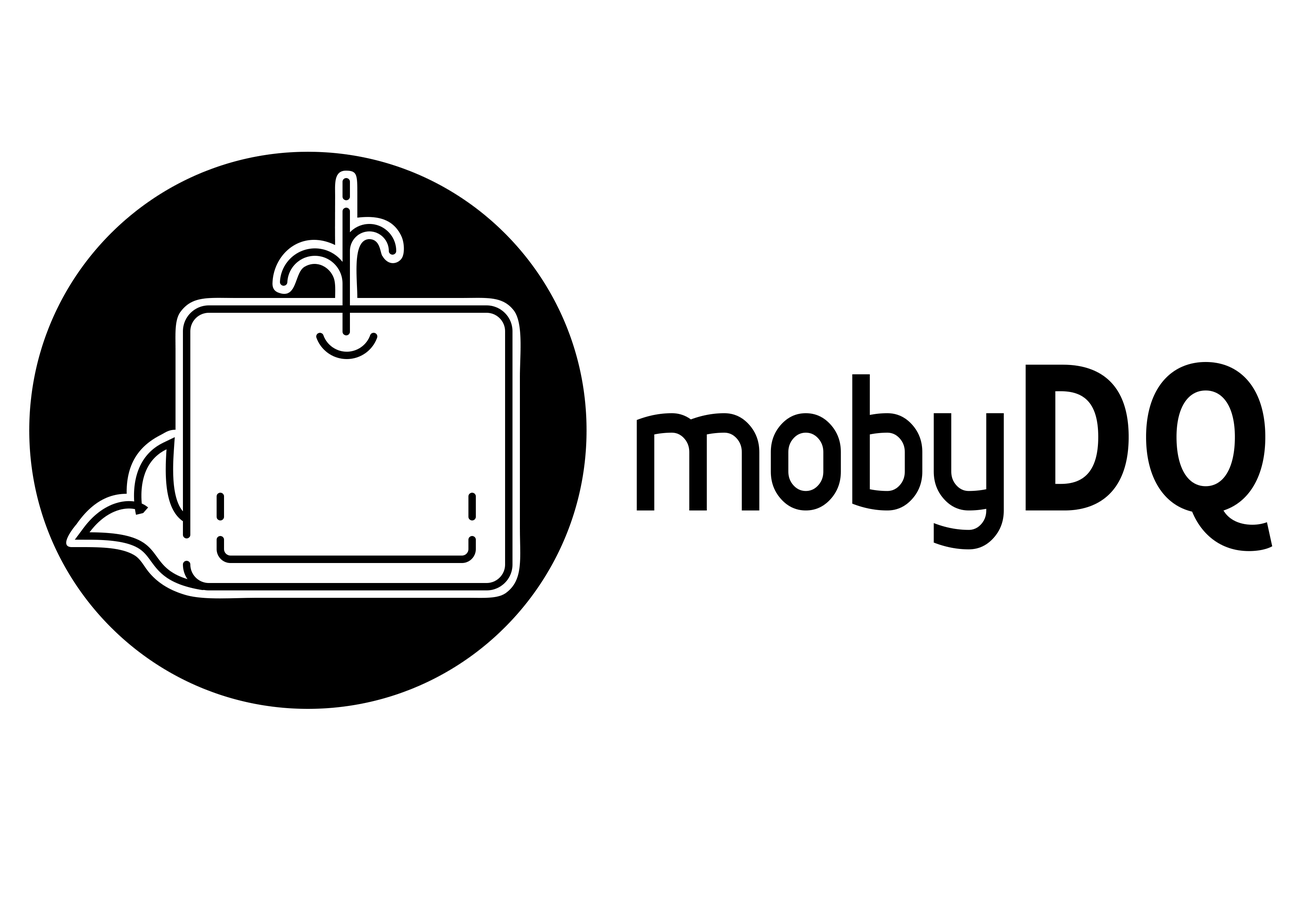
<style>
.page{position:relative;width:1299px;height:918px;background:#ffffff}
.page>*{position:absolute;margin:0}
.t1{font:199px "Bogotana";letter-spacing:0.005em;color:#000000;scale:0.9 1}
.t2{font:223.7px "SourceSansRoman-Bold";letter-spacing:-0.005em;color:#000000;font-weight:bold;scale:0.9 1}
</style>
<div class="page">
<p class="t1" style="left:636px;top:362px;width:636px;height:189px">moby<span class="t2">DQ</span></p>
</div>
